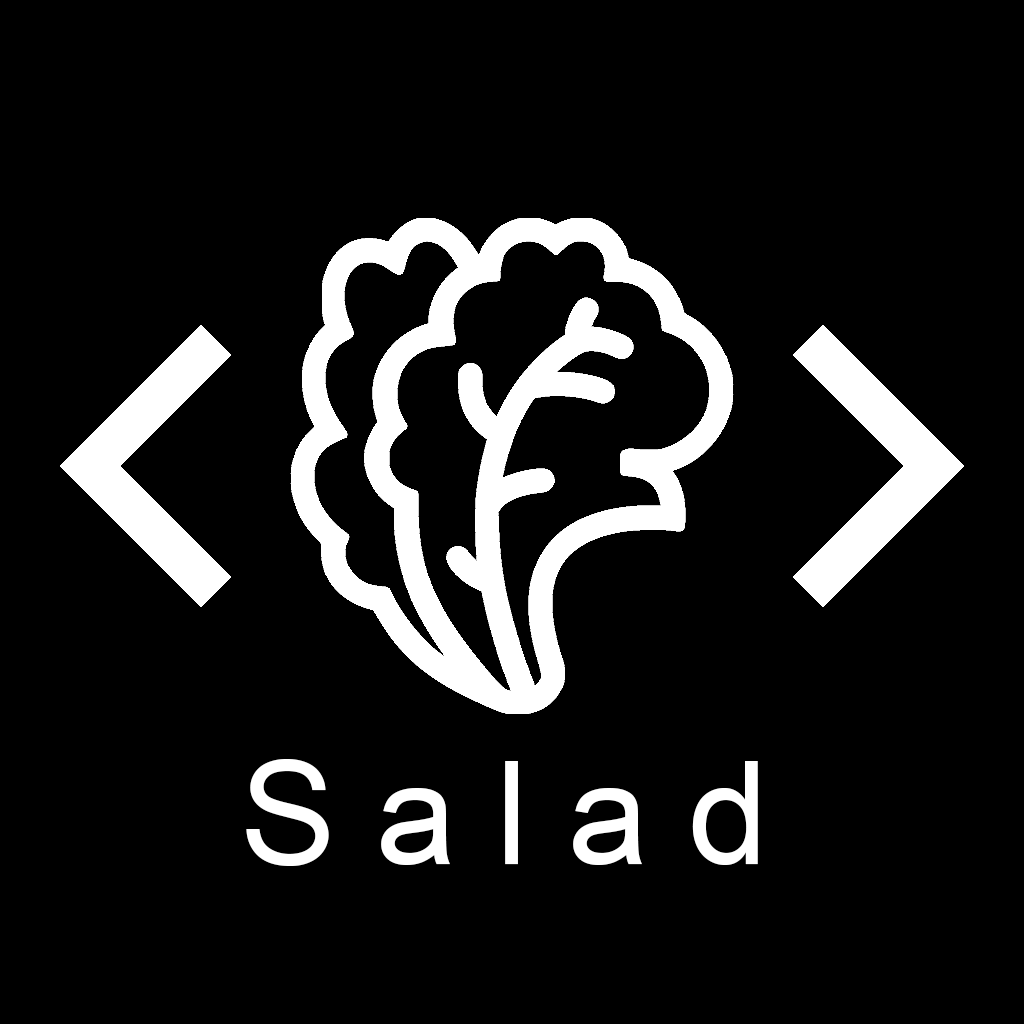
<style>
.page{position:relative;width:1024px;height:1024px;background:#000000}
.page>*{position:absolute;margin:0}
.t1{font:144px "ArialMT";color:#ffffff}
</style>
<div class="page">
<p class="t1" style="left:246px;top:759px;width:512px;height:107px">S a l a d</p>
</div>
